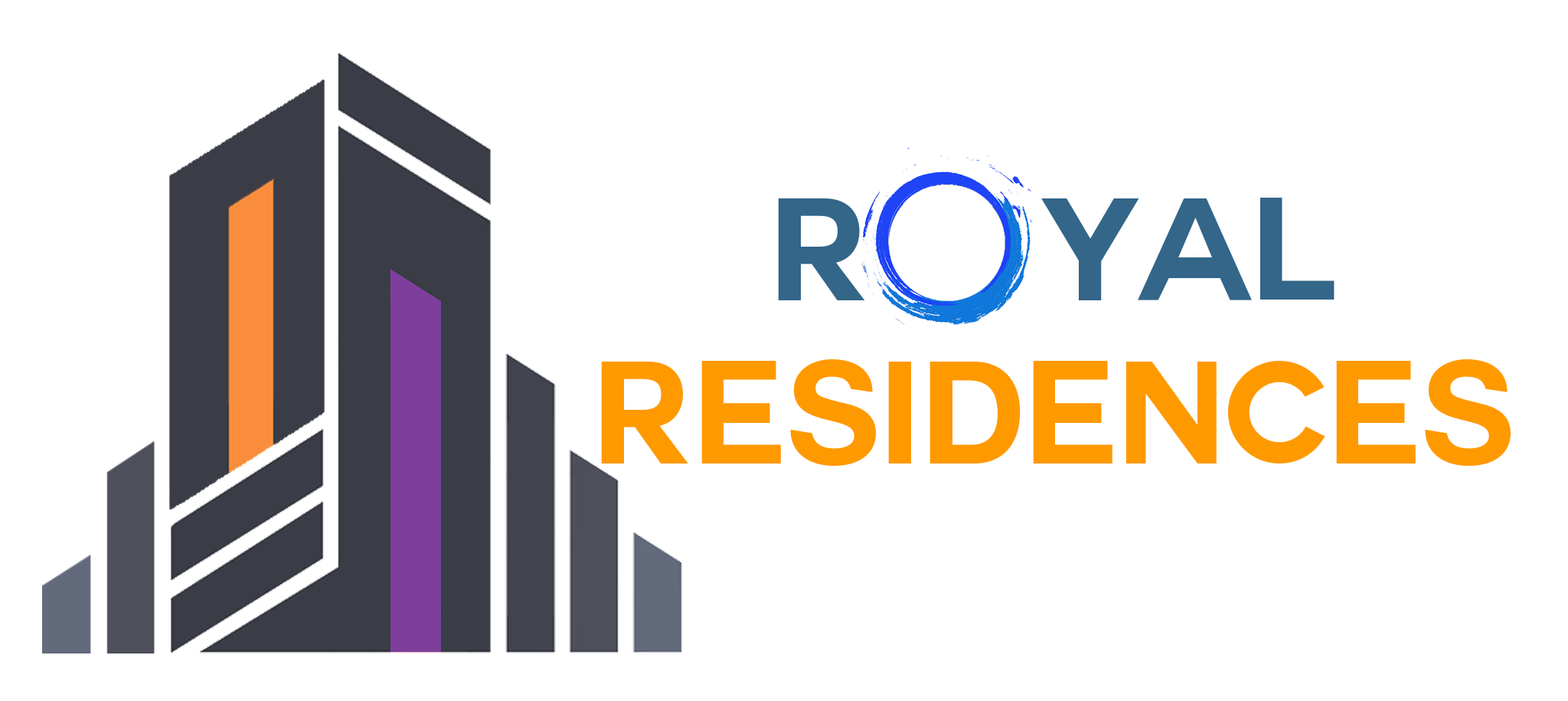
<style>
.page{position:relative;width:1568px;height:701px;background:#ffffff}
.page>*{position:absolute;margin:0}
.t1{font:142.1px "Couture-Bold";color:#336688}
.t2{font:142.1px "Couture-Bold";color:#ff9900}
</style>
<div class="page">
<p class="t1" style="left:778px;top:198px;width:556px;height:102px">R    Yal</p>
<p class="t2" style="left:601px;top:358px;width:910px;height:108px">Residences</p>
</div>
